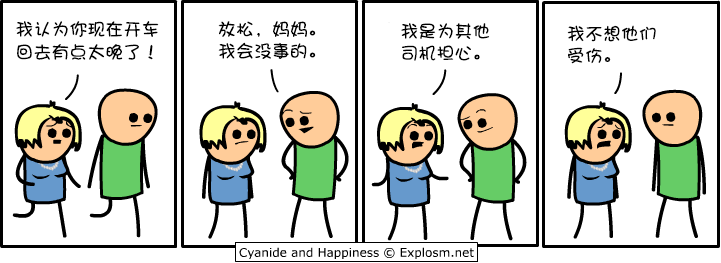
<style>
.page{position:relative;width:721px;height:263px;background:#ffffff}
.page>*{position:absolute;margin:0}
.t1{font:18px/23px "DFShaoNvW5";color:#000000}
.t2{font:18px/22px "DFShaoNvW5";color:#000000}
</style>
<div class="page">
<p class="t1" style="left:16px;top:21px;width:143px;height:39px">我认为你现在开车<br>回去有点太晚了！</p>
<p class="t2" style="left:218px;top:21px;width:98px;height:38px">放松，妈妈。<br>我会没事的。</p>
<p class="t2" style="left:401px;top:23px;width:89px;height:38px">我是为其他<br>司机担心。</p>
<p class="t2" style="left:567px;top:25px;width:89px;height:39px">我不想他们<br>受伤。</p>
</div>
